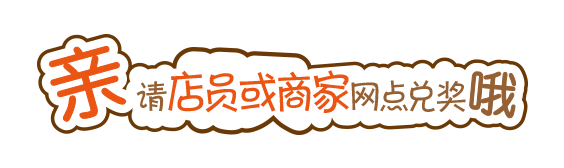
<style>
.page{position:relative;width:564px;height:168px;background:#ffffff}
.page>*{position:absolute;margin:0}
.t1{font:48px "FZKATK--GBK1-0";letter-spacing:0.05em;color:#ea5514}
.t2{font:36px "FZKATK--GBK1-0";letter-spacing:0.05em;color:#956134}
</style>
<div class="page">
<p class="t1" style="left:136px;top:70px;width:330px;height:43px"><span class="t2">请</span>店员或商家<span class="t2">网点兑奖</span></p>
</div>
